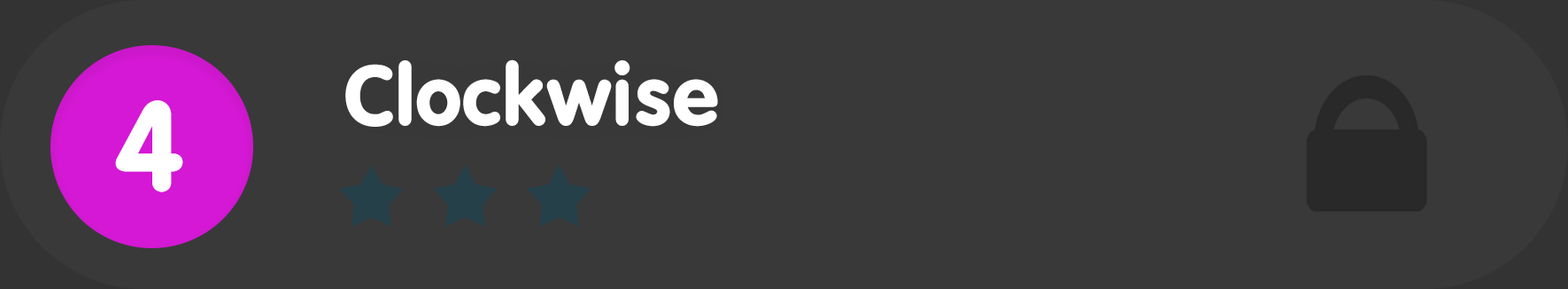
<style>
.page{position:relative;width:1568px;height:289px;background:#393939}
.page>*{position:absolute;margin:0}
.t1{font:88.5px "VAGRundschriftD";color:#ffffff}
.t2{font:132.8px "VAGRundschriftD";color:#ffffff}
</style>
<div class="page">
<p class="t1" style="left:345px;top:59px;width:373px;height:68px">Clockwise</p>
<p class="t2" style="left:115px;top:100px;width:68px;height:92px">4</p>
</div>
